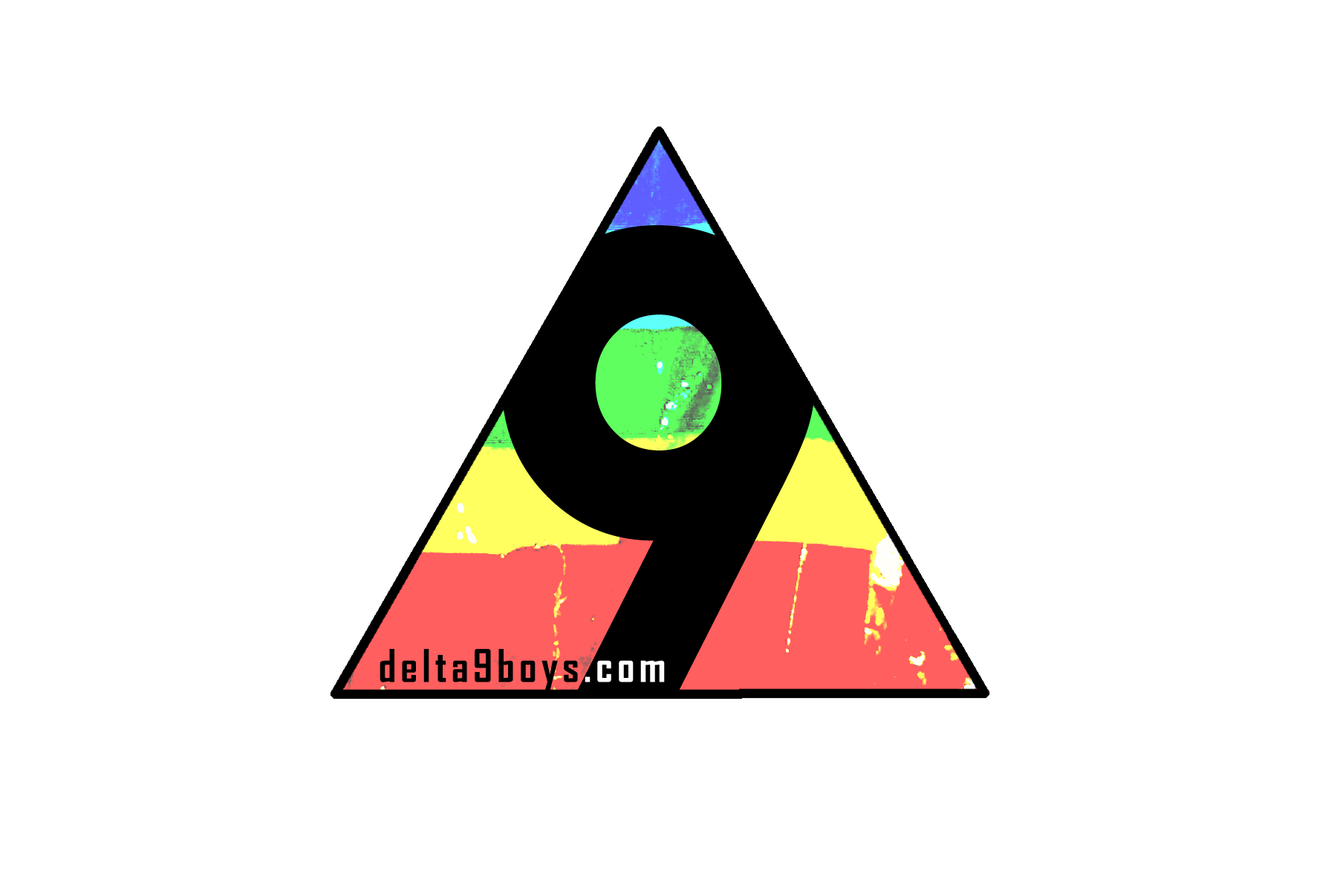
<style>
.page{position:relative;width:1337px;height:892px;background:#ffffff}
.page>*{position:absolute;margin:0}
.t1{font:43.3px "AgencyFB-Bold";letter-spacing:0.1em;color:#000000}
.t2{font:43.3px "AgencyFB-Bold";letter-spacing:0.1em;color:#ffffff}
</style>
<div class="page">
<p class="t1" style="left:380px;top:649px;width:285px;height:41px">delta9boys.com</p>
<p class="t2" style="left:585px;top:660px;width:80px;height:22px">.com</p>
</div>
